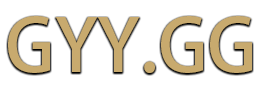
<style>
.page{position:relative;width:260px;height:90px;background:#ffffff}
.page>*{position:absolute;margin:0}
.t1{font:72px "AdobeFanHeitiStd-Bold";color:#c8aa6e}
</style>
<div class="page">
<p class="t1" style="left:8px;top:16px;width:244px;height:57px">GYY.GG</p>
</div>
